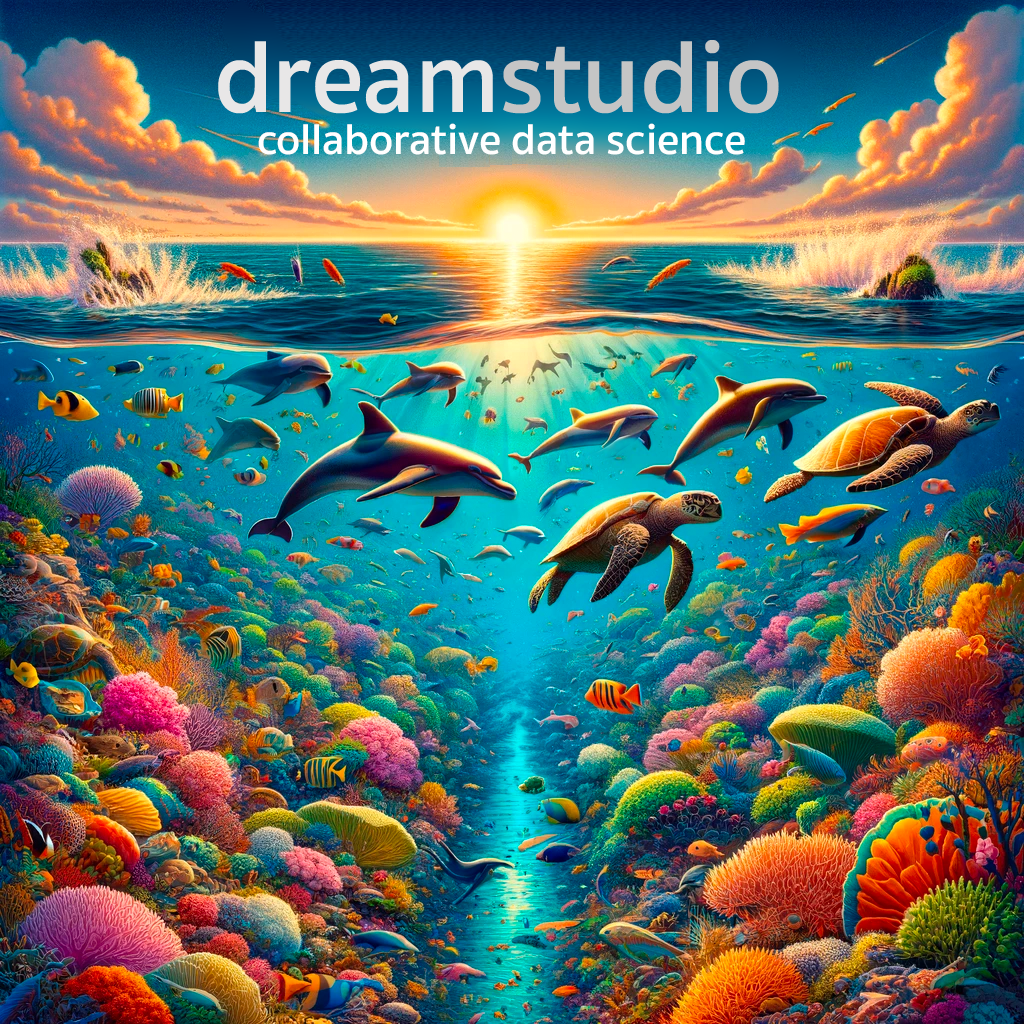
<style>
.page{position:relative;width:1024px;height:1024px}
.page>*{position:absolute;margin:0}
.t1{font:75.8px "SukhumvitSet-SemiBold";letter-spacing:-0.005em;color:#ffffff}
</style>
<div class="page">
<p class="t1" style="left:258px;top:123px;width:487px;height:32px">collaborative data science</p>
</div>
